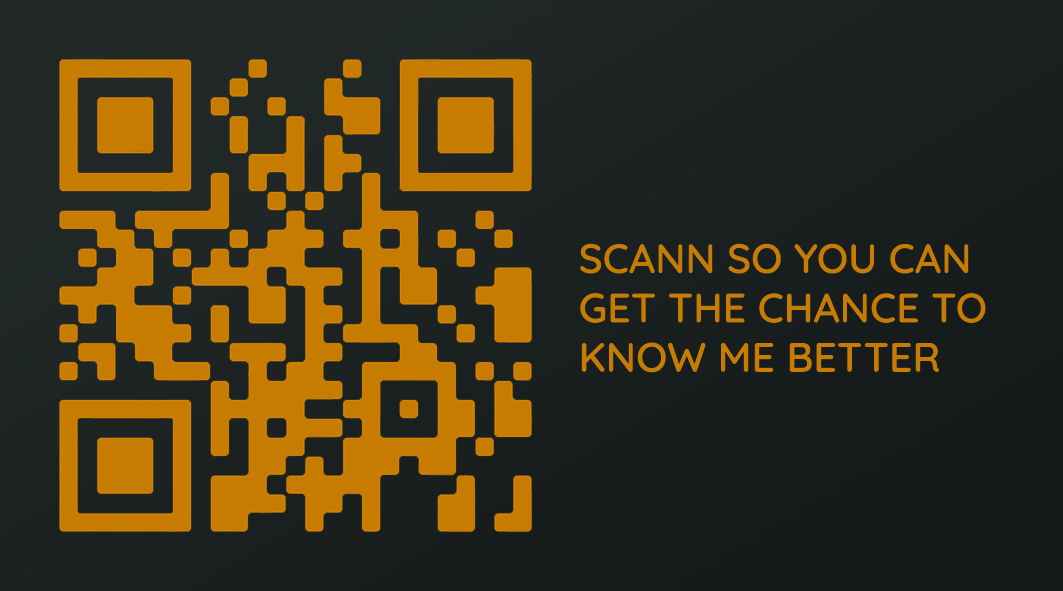
<style>
.page{position:relative;width:1063px;height:591px}
.page>*{position:absolute;margin:0}
.t1{font:41.2px "Quicksand-SemiBold";color:#c77c00}
</style>
<div class="page">
<p class="t1" style="left:580px;top:243px;width:406px;height:130px">SCANN SO YOU CAN <br>GET THE CHANCE TO<br>KNOW ME BETTER</p>
</div>
